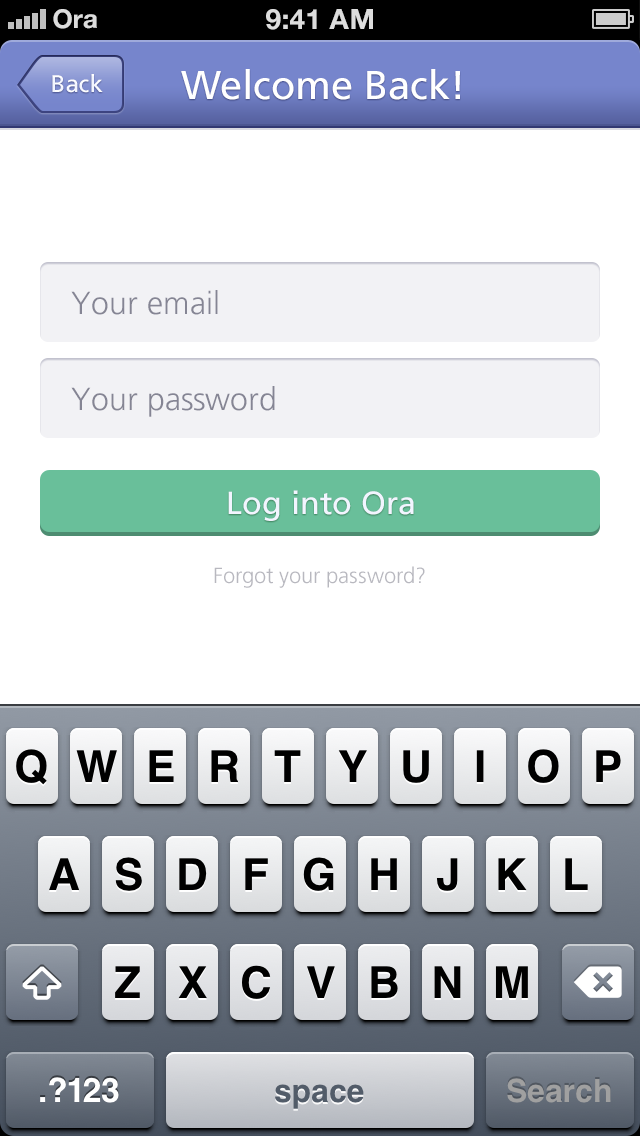
<style>
.page{position:relative;width:640px;height:1136px;background:#ffffff}
.page>*{position:absolute;margin:0}
.t1{font:24px "FrutigerLT-Roman";color:#f2f5ff}
.t2{font:40px "FrutigerLT-Roman";color:#ffffff}
.t3{font:32px "FrutigerLT-Light";color:#858594}
.t4{font:32px "FrutigerLT-Roman";color:#f2f5ff}
.t5{font:22px "FrutigerLT-Light";color:#b8b8bf}
</style>
<div class="page">
<p class="t1" style="left:52px;top:74px;width:51px;height:19px">Back</p>
<p class="t2" style="left:181px;top:69px;width:279px;height:31px">Welcome Back!</p>
<p class="t3" style="left:71px;top:290px;width:147px;height:25px">Your email</p>
<p class="t3" style="left:71px;top:386px;width:204px;height:31px">Your password</p>
<p class="t4" style="left:228px;top:490px;width:186px;height:31px">Log into Ora</p>
<p class="t5" style="left:214px;top:566px;width:211px;height:22px">Forgot your password?</p>
</div>
